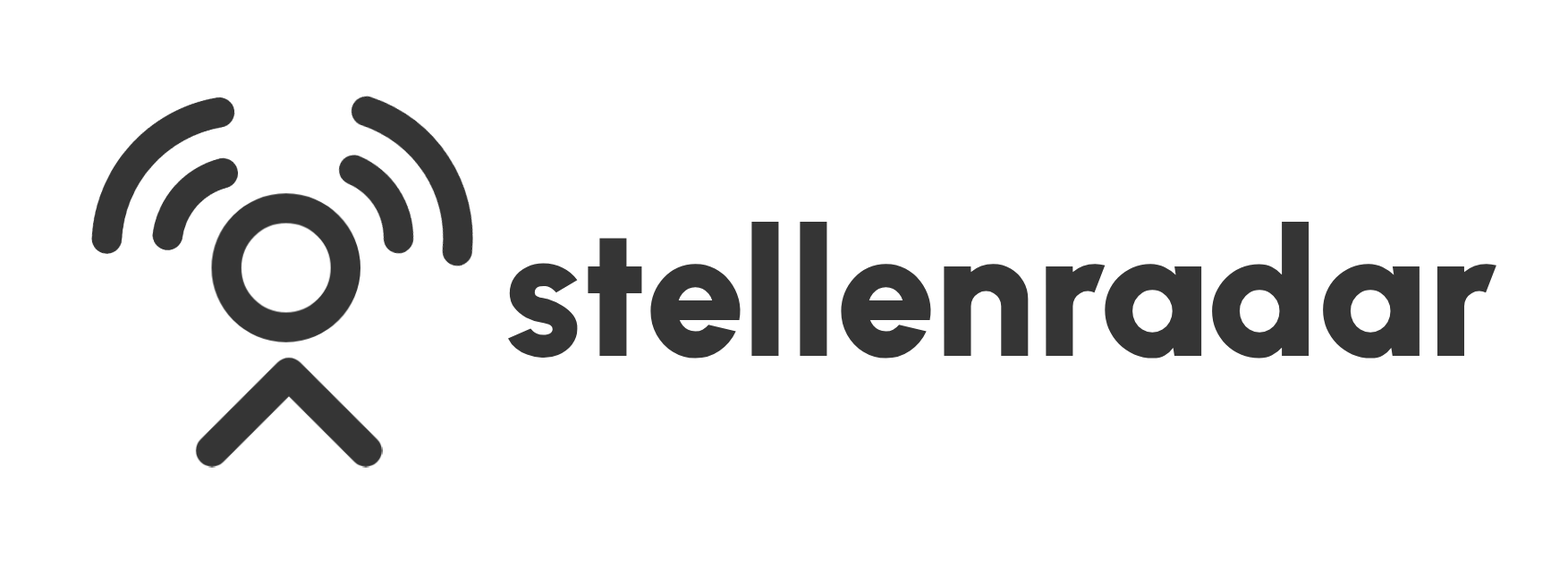
<style>
.page{position:relative;width:1568px;height:574px;background:#ffffff}
.page>*{position:absolute;margin:0}
.t1{font:178.9px "Urbanist-Black";color:#353535}
</style>
<div class="page">
<p class="t1" style="left:508px;top:222px;width:988px;height:137px">stellenradar</p>
</div>
